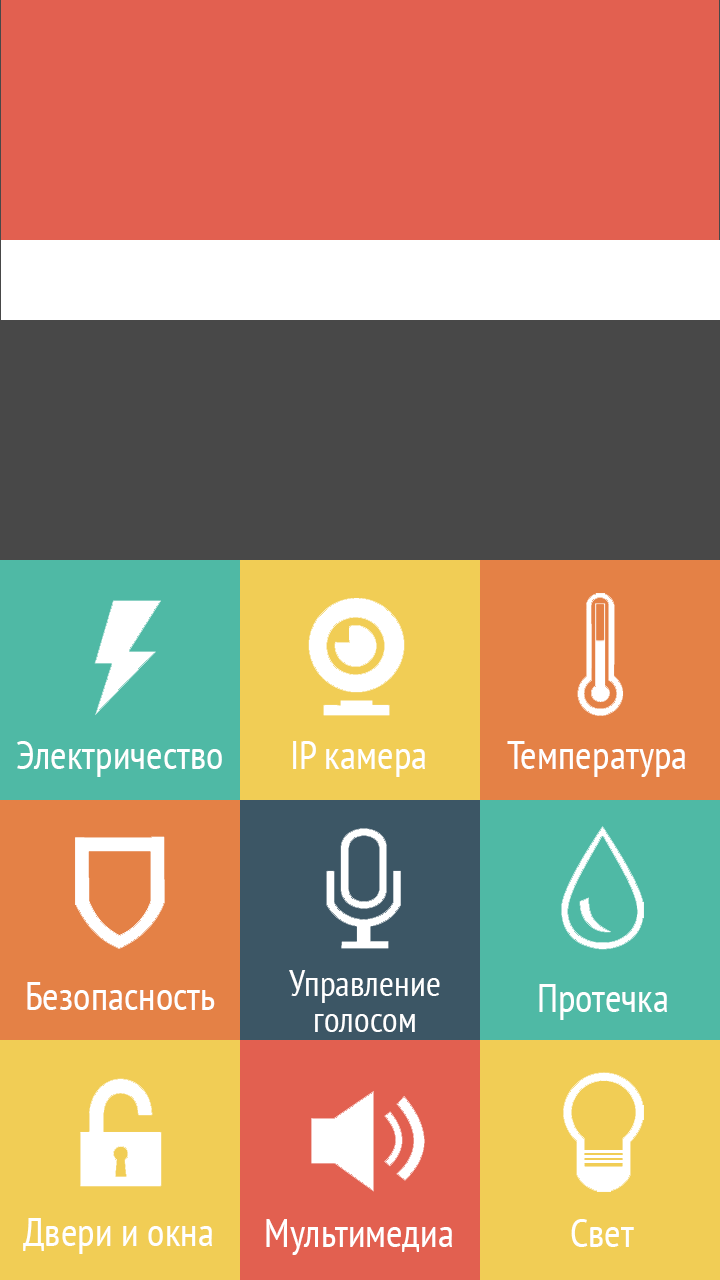
<style>
.page{position:relative;width:720px;height:1280px;background:#e26050}
.page>*{position:absolute;margin:0}
.t1{font:40.3px "PTSans-Narrow";color:#ffffff}
.t2{font:36.2px/36.2px "PTSans-Narrow";color:#ffffff}
</style>
<div class="page">
<p class="t1" style="left:17px;top:741px;width:205px;height:36px">Электричество</p>
<p class="t1" style="left:293px;top:741px;width:132px;height:36px">IP камера</p>
<p class="t1" style="left:507px;top:741px;width:178px;height:36px">Температура</p>
<p class="t2" style="left:289px;top:970px;width:151px;height:62px;text-align:center">Управление<br>голосом</p>
<p class="t1" style="left:27px;top:982px;width:188px;height:28px">Безопасность</p>
<p class="t1" style="left:539px;top:984px;width:128px;height:36px">Протечка</p>
<p class="t1" style="left:23px;top:1218px;width:189px;height:36px">Двери и окна</p>
<p class="t1" style="left:266px;top:1219px;width:186px;height:36px">Мультимедиа</p>
<p class="t1" style="left:571px;top:1219px;width:63px;height:28px">Свет</p>
</div>
